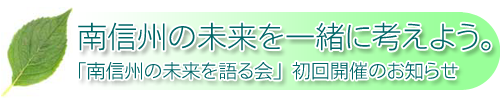
<style>
.page{position:relative;width:500px;height:100px;background:#ffffff}
.page>*{position:absolute;margin:0}
.t1{font:30px "FMotoyaCedar-W1-90mskp-RKSJ-H";color:#006666}
.t2{font:19px "FMotoyaCedar-W1-90mskp-RKSJ-H";color:#006666}
</style>
<div class="page">
<p class="t1" style="left:78px;top:22px;width:413px;height:29px">南信州の未来を一緒に考えよう。</p>
<p class="t2" style="left:79px;top:62px;width:379px;height:18px">「南信州の未来を語る会」初回開催のお知らせ</p>
</div>
